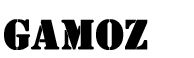
<style>
.page{position:relative;width:194px;height:58px;background:#ffffff}
.page>*{position:absolute;margin:0}
.t1{font:43.8px "Stencil";color:#000000;font-weight:bold}
</style>
<div class="page">
<p class="t1" style="left:4px;top:19px;width:144px;height:31px">Gamoz</p>
</div>
